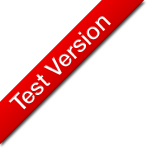
<style>
.page{position:relative;width:150px;height:150px;background:#ffffff}
.page>*{position:absolute;margin:0}
.t1{font:23.3px "Swiss721BT-Medium";color:#ffffff}
</style>
<div class="page">
<p class="t1" style="left:8px;top:16px;width:103px;height:94px;rotate:-45deg">Test Version</p>
</div>
